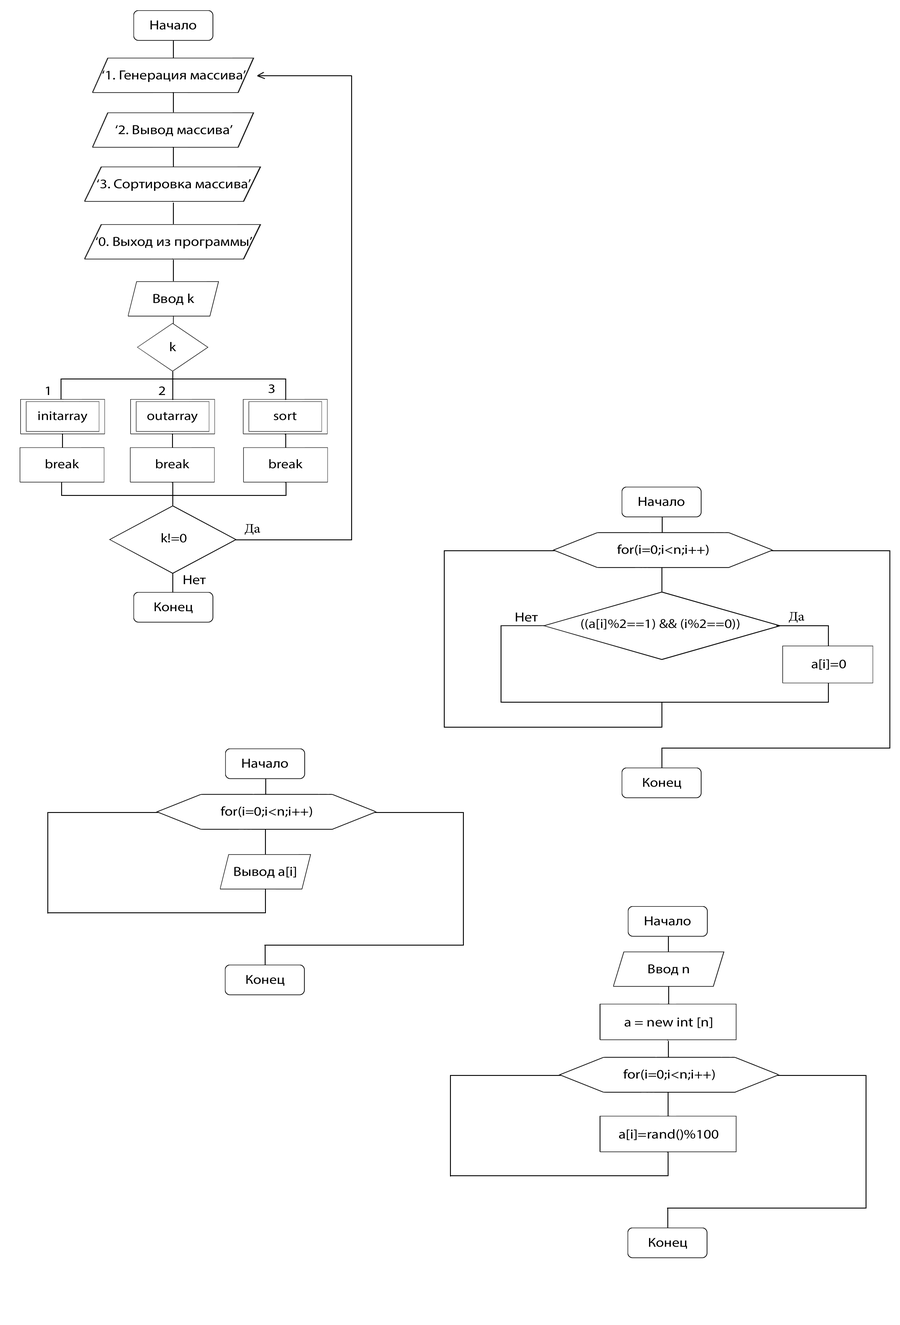
<style>
.page{position:relative;width:900px;height:1325px;background:#ffffff}
.page>*{position:absolute;margin:0}
.t1{font:13.2px "MyriadPro-Regular";color:#000000;scale:1.14 1}
.t2{font:12.9px "MyriadPro-Regular";color:#000000;scale:1.14 1}
.t3{font:12.8px "MyriadPro-Regular";color:#000000;scale:1.14 1}
.t4{font:13.2px "MyriadPro-Regular";color:#000000;scale:1.13 1}
</style>
<div class="page">
<p class="t1" style="left:150px;top:20px;width:46px;height:10px">Начало</p>
<p class="t1" style="left:102px;top:70px;width:144px;height:12px">‘1. Генерация массива’</p>
<p class="t1" style="left:115px;top:125px;width:118px;height:11px">‘2. Вывод массива’</p>
<p class="t1" style="left:97px;top:179px;width:154px;height:12px">‘3. Сортировка массива’</p>
<p class="t1" style="left:96px;top:237px;width:156px;height:12px">‘0. Выход из программы’</p>
<p class="t1" style="left:153px;top:294px;width:41px;height:11px">Ввод k</p>
<p class="t2" style="left:170px;top:342px;width:6px;height:9px">k</p>
<p class="t2" style="left:46px;top:386px;width:3px;height:9px">1</p>
<p class="t2" style="left:159px;top:386px;width:6px;height:9px">2</p>
<p class="t2" style="left:269px;top:384px;width:6px;height:9px">3</p>
<p class="t3" style="left:38px;top:411px;width:49px;height:12px">initarray</p>
<p class="t3" style="left:147px;top:412px;width:51px;height:11px">outarray</p>
<p class="t3" style="left:274px;top:412px;width:22px;height:8px">sort</p>
<p class="t3" style="left:46px;top:459px;width:33px;height:10px">break</p>
<p class="t3" style="left:156px;top:459px;width:33px;height:10px">break</p>
<p class="t3" style="left:269px;top:459px;width:34px;height:10px">break</p>
<p class="t1" style="left:639px;top:497px;width:45px;height:9px">Начало</p>
<p class="t2" style="left:161px;top:533px;width:25px;height:10px">k!=0</p>
<p class="t2" style="left:617px;top:544px;width:92px;height:12px">for(i=0;i&lt;n;i++)</p>
<p class="t4" style="left:184px;top:575px;width:22px;height:9px">Нет</p>
<p class="t2" style="left:154px;top:602px;width:39px;height:11px">Конец</p>
<p class="t4" style="left:516px;top:612px;width:22px;height:10px">Нет</p>
<p class="t2" style="left:581px;top:619px;width:158px;height:11px">((a[i]%2==1) &amp;&amp; (i%2==0))</p>
<p class="t2" style="left:811px;top:659px;width:35px;height:11px">a[i]=0</p>
<p class="t1" style="left:242px;top:759px;width:46px;height:9px">Начало</p>
<p class="t2" style="left:643px;top:778px;width:38px;height:11px">Конец</p>
<p class="t2" style="left:221px;top:806px;width:91px;height:11px">for(i=0;i&lt;n;i++)</p>
<p class="t1" style="left:234px;top:867px;width:62px;height:11px">Вывод a[i]</p>
<p class="t1" style="left:645px;top:916px;width:46px;height:10px">Начало</p>
<p class="t2" style="left:648px;top:964px;width:41px;height:11px">Ввод n</p>
<p class="t2" style="left:246px;top:975px;width:38px;height:11px">Конец</p>
<p class="t1" style="left:624px;top:1017px;width:88px;height:11px">a = new int [n]</p>
<p class="t2" style="left:623px;top:1069px;width:92px;height:11px">for(i=0;i&lt;n;i++)</p>
<p class="t1" style="left:619px;top:1129px;width:100px;height:11px">a[i]=rand()%100</p>
<p class="t2" style="left:649px;top:1238px;width:38px;height:11px">Конец</p>
</div>
